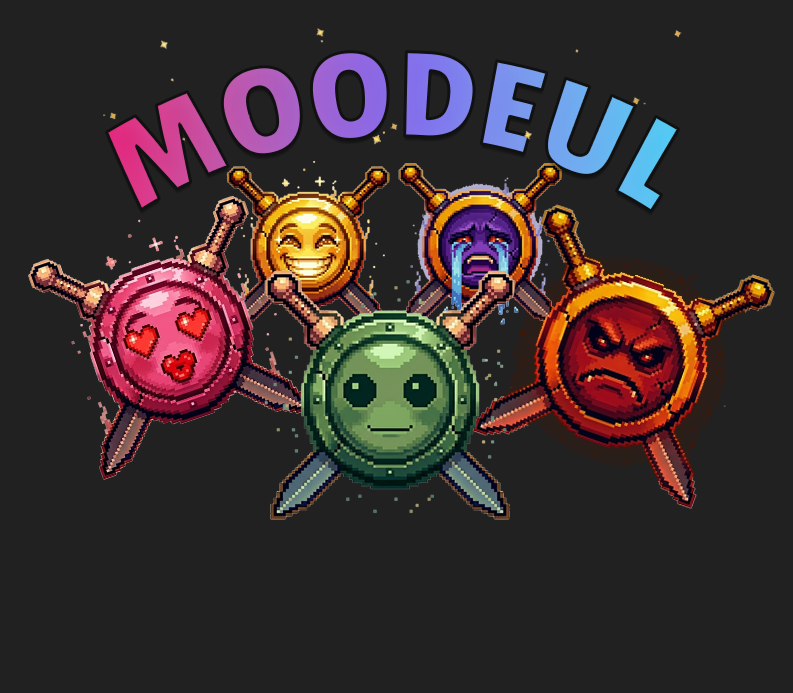
<style>
.page{position:relative;width:793px;height:693px;background:#212121}
.page>*{position:absolute;margin:0}
.t1{font:128.8px "TwCenMT-CondensedExtraBold"}
</style>
<div class="page">
<p class="t1" style="left:106px;top:51px;width:573px;height:161px">MOODEUL</p>
</div>
